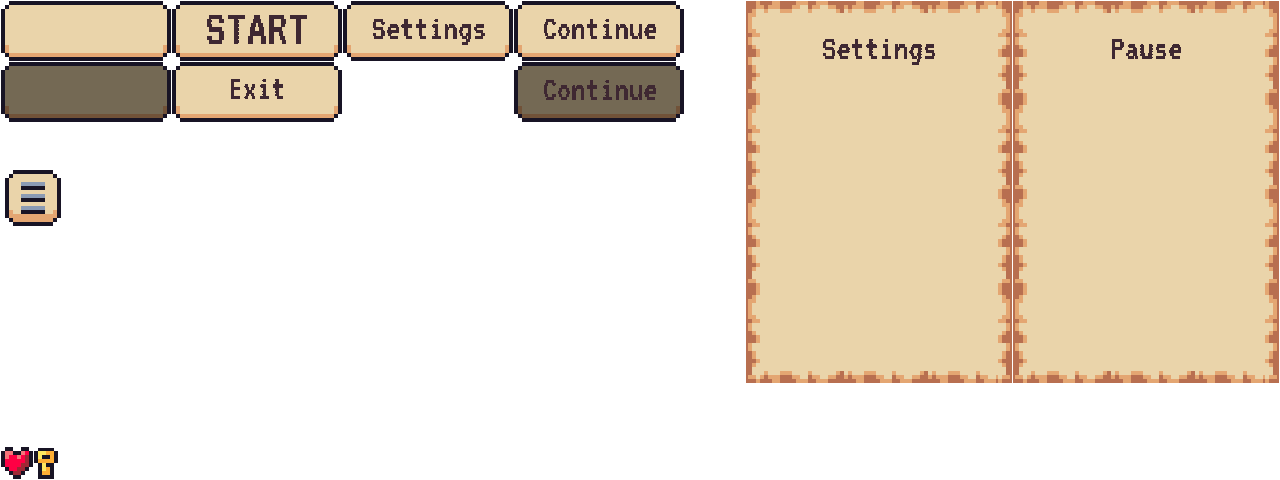
<style>
.page{position:relative;width:1280px;height:480px;background:#ffffff}
.page>*{position:absolute;margin:0}
.t1{font:52px "VT323-Regular";color:#3f2832}
.t2{font:36px "VT323-Regular";color:#3f2832}
</style>
<div class="page">
<p class="t1" style="left:206px;top:14px;width:102px;height:30px">START</p>
<p class="t2" style="left:372px;top:18px;width:113px;height:27px">Settings</p>
<p class="t2" style="left:543px;top:18px;width:114px;height:21px">Continue</p>
<p class="t2" style="left:823px;top:38px;width:113px;height:27px">Settings</p>
<p class="t2" style="left:1111px;top:38px;width:71px;height:21px">Pause</p>
<p class="t2" style="left:230px;top:78px;width:54px;height:21px">Exit</p>
<p class="t2" style="left:543px;top:79px;width:114px;height:21px">Continue</p>
</div>
